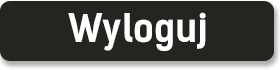
<style>
.page{position:relative;width:280px;height:70px;background:#242420}
.page>*{position:absolute;margin:0}
.t1{font:37.5px "KelsonSansBG-Bold";color:#ffffff}
</style>
<div class="page">
<p class="t1" style="left:68px;top:12px;width:138px;height:39px">Wyloguj</p>
</div>
